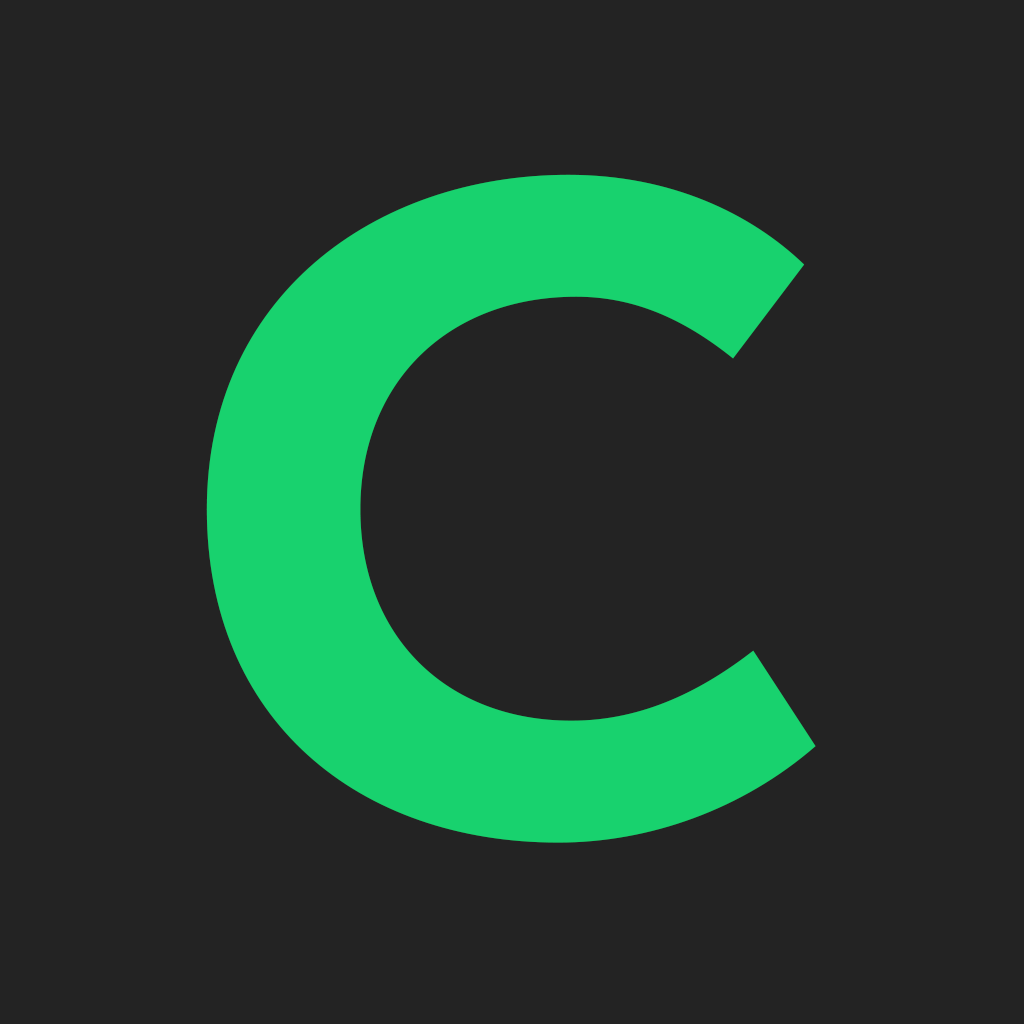
<style>
.page{position:relative;width:1024px;height:1024px;background:#232323}
.page>*{position:absolute;margin:0}
.t1{font:1296px "SourceCodePro-Semibold";color:#18d26e}
</style>
<div class="page">
<p class="t1" style="left:206px;top:174px;width:610px;height:669px">c</p>
</div>
